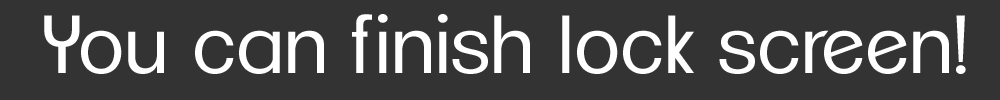
<style>
.page{position:relative;width:1000px;height:100px;background:#333333}
.page>*{position:absolute;margin:0}
.t1{font:80px "ClementePDag-Book";color:#ffffff}
</style>
<div class="page">
<p class="t1" style="left:44px;top:14px;width:922px;height:60px">You can finish lock screen!</p>
</div>
